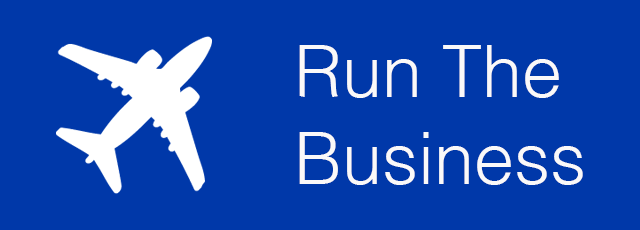
<style>
.page{position:relative;width:640px;height:230px;background:#0038a9}
.page>*{position:absolute;margin:0}
.t1{font:72px "Helvetica-Light";color:#faf9f9}
</style>
<div class="page">
<p class="t1" style="left:299px;top:45px;width:284px;height:140px">Run The<br>Business</p>
</div>
